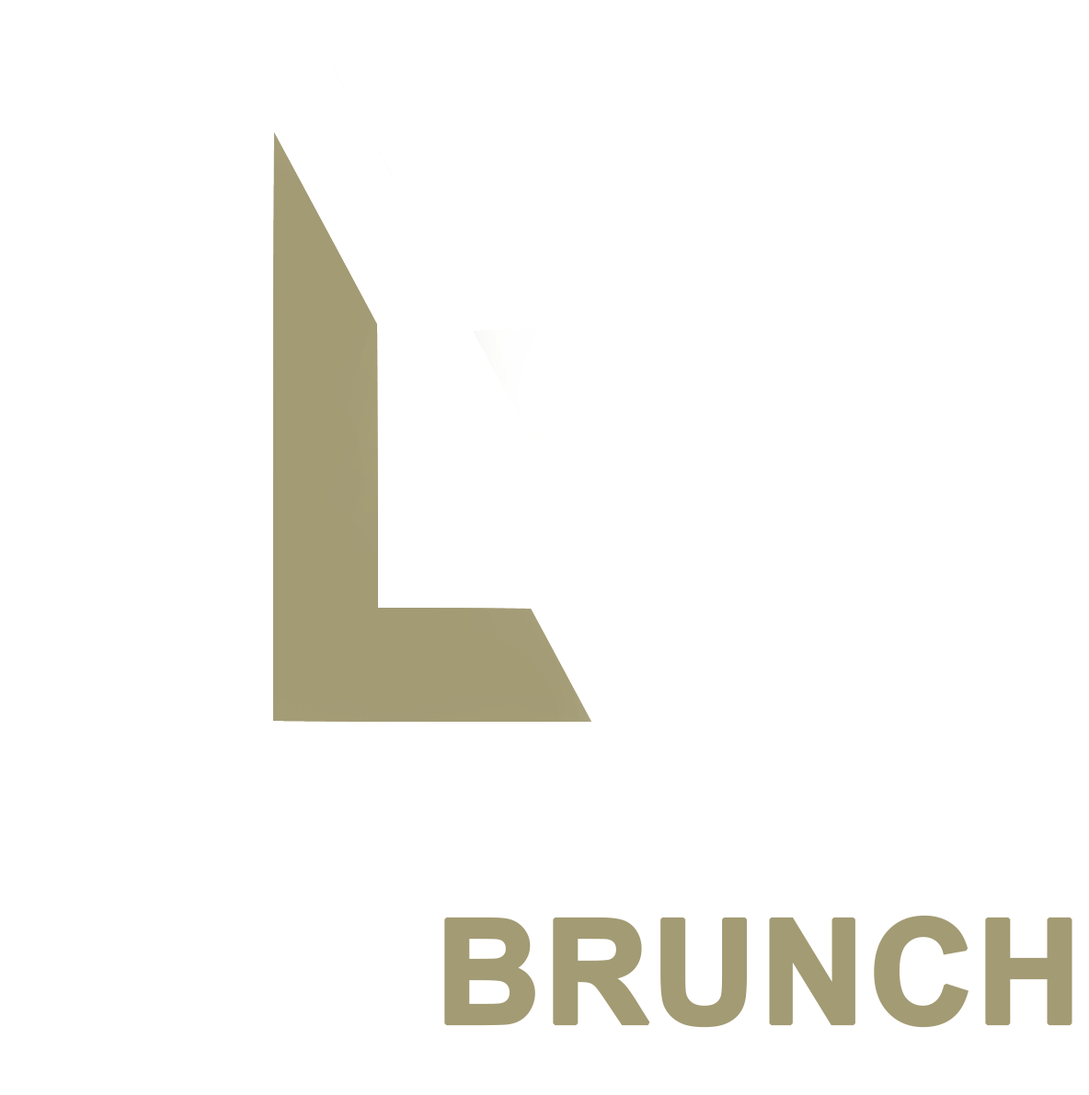
<style>
.page{position:relative;width:1089px;height:1095px;background:#ffffff}
.page>*{position:absolute;margin:0}
.t1{font:144.4px "Arial-BoldMT";color:#a39b74;font-weight:bold}
.t2{font:144.4px "Arial-BoldMT";color:#ffffff;font-weight:bold}
</style>
<div class="page">
<p class="t1" style="left:16px;top:915px;width:1056px;height:113px"><span class="t2">LETS </span>BRUNCH</p>
</div>
